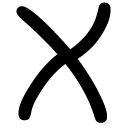
<style>
.page{position:relative;width:130px;height:130px;background:#ffffff}
.page>*{position:absolute;margin:0}
.t1{font:125px "KristenITC-Regular";color:#000000}
</style>
<div class="page">
<p class="t1" style="left:16px;top:2px;width:95px;height:121px">X</p>
</div>
